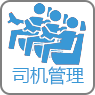
<style>
.page{position:relative;width:95px;height:95px;background:#ffffff}
.page>*{position:absolute;margin:0}
.t1{font:18px "MicrosoftYaHei";color:#3998d6}
</style>
<div class="page">
<p class="t1" style="left:12px;top:66px;width:72px;height:19px">司机管理</p>
</div>
